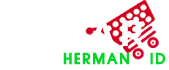
<style>
.page{position:relative;width:169px;height:70px;background:#ffffff}
.page>*{position:absolute;margin:0}
.t1{font:14px "AuxinDemiBold";letter-spacing:0.15em;color:#04d628;text-transform:uppercase}
</style>
<div class="page">
<p class="t1" style="left:63px;top:52px;width:103px;height:13px">herman   id</p>
</div>
